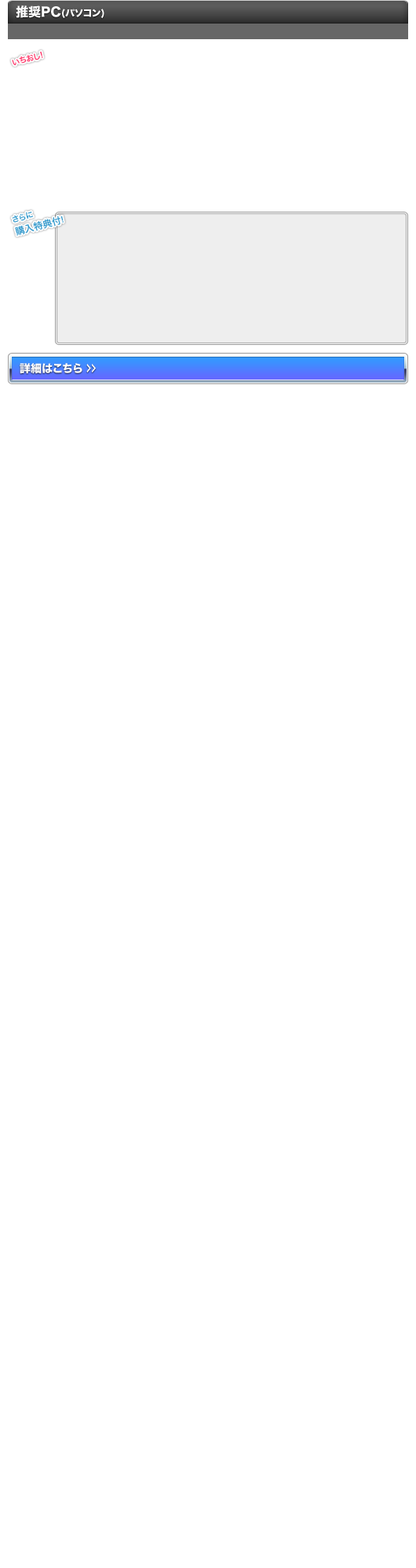
<style>
.page{position:relative;width:416px;height:1568px;background:#ffffff}
.page>*{position:absolute;margin:0}
.t1{font:9.4px "HiraKakuStd-W8";color:#ffffff}
.t2{font:12.5px "HiraKakuStd-W8";color:#ffffff}
.t3{font:7.8px "HiraKakuPro-W6";color:#ff3366}
.t4{font:9.4px/11.8px "HiraKakuPro-W6";color:#3399cc}
.t5{font:7.8px/11.8px "HiraKakuPro-W6";color:#3399cc}
.t6{font:11px "HiraKakuStd-W8";color:#fffefe}
.t7{font:11px "HiraKakuStd-W8";color:#fffefe;scale:0.5 1}
</style>
<div class="page">
<p class="t1" style="left:16px;top:5px;width:88px;height:14px"><span class="t2">推奨PC</span>(パソコン)</p>
<p class="t3" style="left:12px;top:51px;width:31px;height:15px;rotate:-15deg">いちおし!</p>
<p class="t4" style="left:12px;top:212px;width:52px;height:24px;rotate:-15deg"><span class="t5">さらに<br></span>購入特典付<span class="t5">!</span></p>
<p class="t6" style="left:20px;top:363px;width:76px;height:11px">詳細はこちら <span class="t7">＞＞</span></p>
</div>
